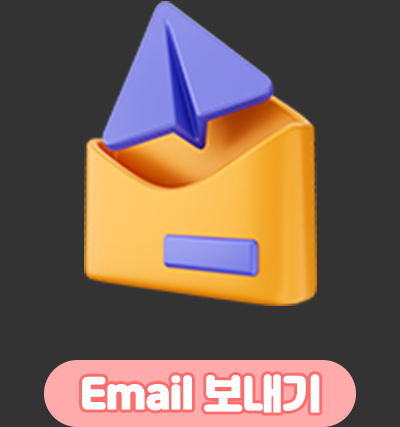
<style>
.page{position:relative;width:400px;height:427px;background:#333333}
.page>*{position:absolute;margin:0}
.t1{font:40px "JalnanOTF";letter-spacing:-0.05em;color:#ffffff;font-weight:bold}
</style>
<div class="page">
<p class="t1" style="left:82px;top:374px;width:238px;height:39px">Email 보내기</p>
</div>
